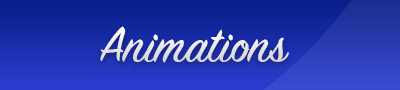
<style>
.page{position:relative;width:400px;height:90px}
.page>*{position:absolute;margin:0}
.t1{font:53.8px "SignPainter-HouseScript";color:#e5e5e5}
</style>
<div class="page">
<p class="t1" style="left:100px;top:26px;width:189px;height:37px">Animations</p>
</div>
